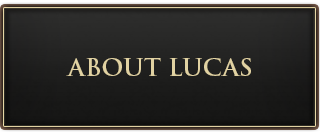
<style>
.page{position:relative;width:320px;height:133px}
.page>*{position:absolute;margin:0}
.t1{font:23.6px "TrajanPro-Bold";letter-spacing:0.01em;color:#e1d2a2}
</style>
<div class="page">
<p class="t1" style="left:66px;top:58px;width:185px;height:18px">ABOUT LUCAS</p>
</div>
